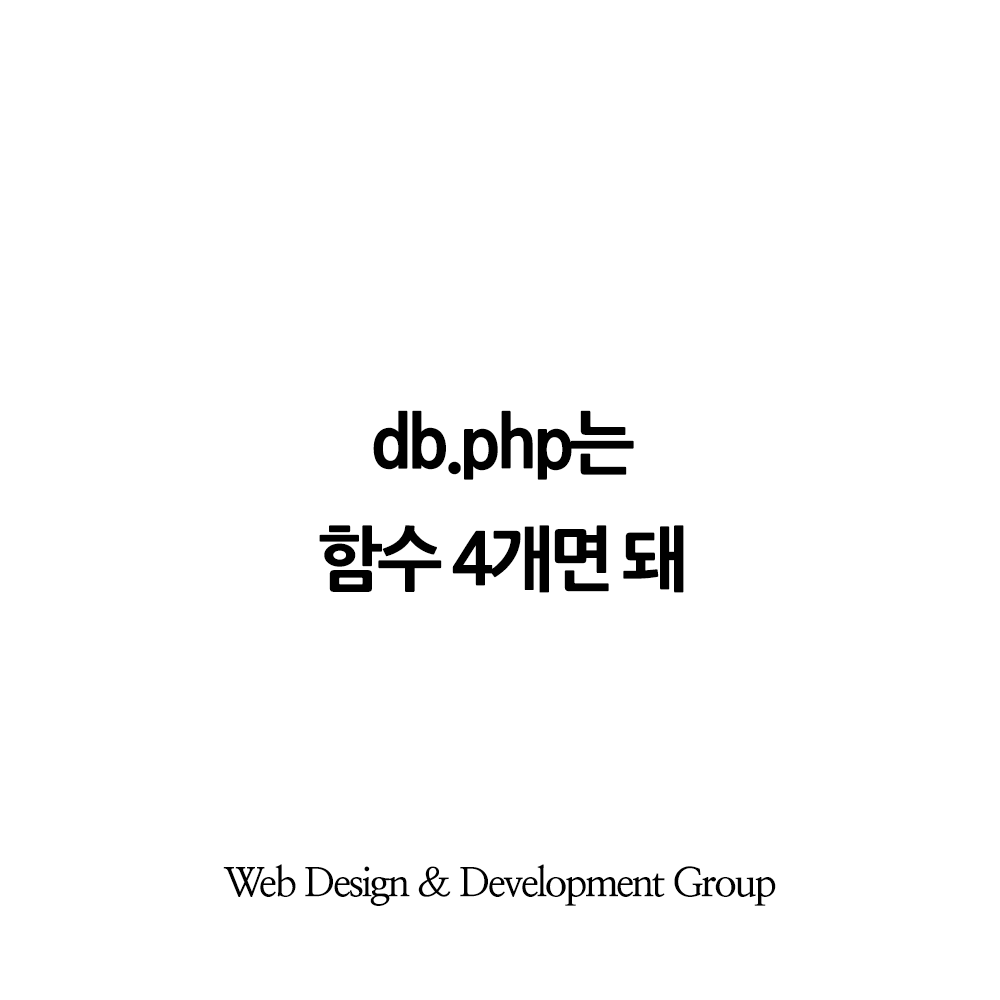
<style>
.page{position:relative;width:1000px;height:1000px;background:#ffffff}
.page>*{position:absolute;margin:0}
.t1{font:70px/116.4px "NanumGothicExtraBold";letter-spacing:-0.08em;color:#000000}
.t2{font:40px "NanumMyeongjoBold";letter-spacing:-0.06em;color:#000000}
</style>
<div class="page">
<p class="t1" style="left:319px;top:410px;width:365px;height:183px;text-align:center">db.php는<br>함수 4개면 돼</p>
<p class="t2" style="left:223px;top:864px;width:553px;height:42px">Web Design &amp; Development Group</p>
</div>
